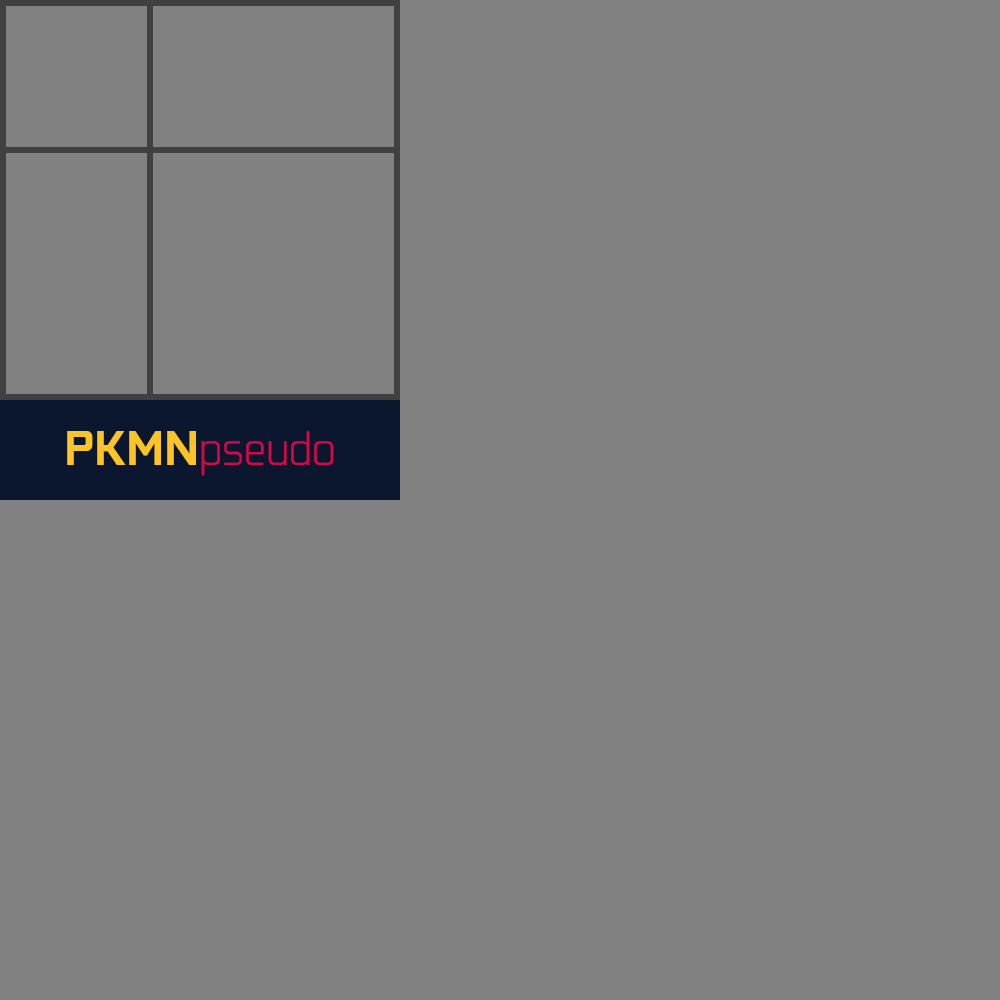
<style>
.page{position:relative;width:1000px;height:1000px;background:#818181}
.page>*{position:absolute;margin:0}
.t1{font:49.8px "GeForce-Light";color:#d90749}
.t2{font:49.8px "GeForce-Bold";color:#fcc426}
</style>
<div class="page">
<p class="t1" style="left:67px;top:431px;width:267px;height:45px"><span class="t2">PKMN</span>pseudo</p>
</div>
